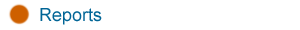
<style>
.page{position:relative;width:300px;height:30px;background:#ffffff}
.page>*{position:absolute;margin:0}
.t1{font:18px "ArialMT";color:#016596}
</style>
<div class="page">
<p class="t1" style="left:40px;top:8px;width:62px;height:17px">Reports</p>
</div>
